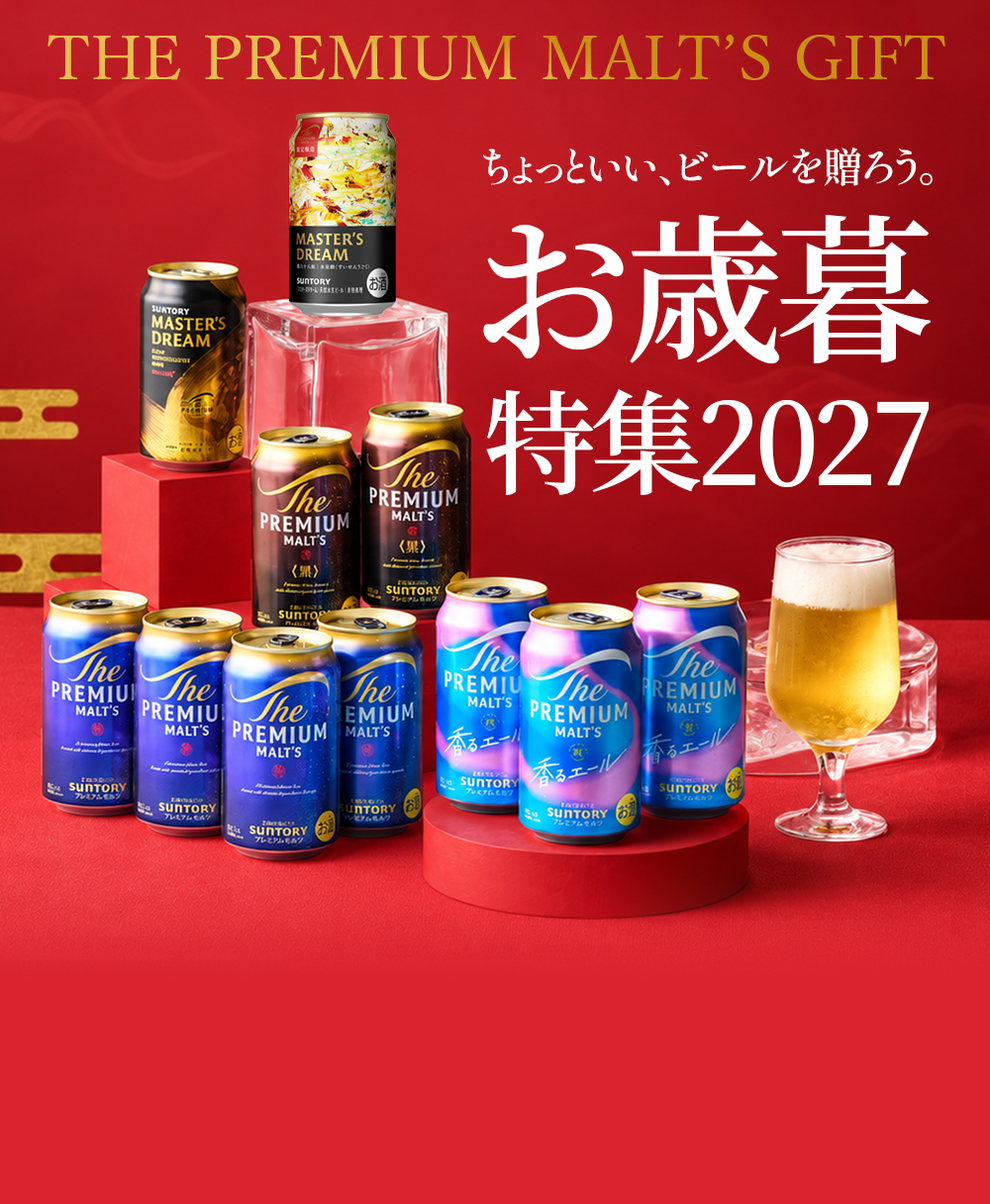
<style>
.page{position:relative;width:990px;height:1204px}
.page>*{position:absolute;margin:0}
.t1{font:60.9px "YuMin-Medium";letter-spacing:0.01em}
.t2{font:40.6px "ShipporiMincho-SemiBold";letter-spacing:-0.025em;color:#ffffff}
.t3{font:159.3px "SourceHanSerif-SemiBold";letter-spacing:-0.05em;color:#ffffff}
.t4{font:112.6px "SourceHanSerif-SemiBold";letter-spacing:-0.05em;color:#ffffff}
</style>
<div class="page">
<p class="t1" style="left:48px;top:35px;width:898px;height:45px">THE PREMIUM MALT’S GIFT</p>
<p class="t2" style="left:483px;top:148px;width:450px;height:38px">ちょっといい、ビールを贈ろう。</p>
<p class="t3" style="left:483px;top:215px;width:448px;height:149px">お歳暮</p>
<p class="t4" style="left:486px;top:389px;width:443px;height:106px">特集2027</p>
</div>
